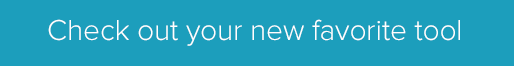
<style>
.page{position:relative;width:514px;height:66px;background:#1c9ebc}
.page>*{position:absolute;margin:0}
.t1{font:30px "ProximaNova-Light";letter-spacing:-0.006em;color:#ffffff}
</style>
<div class="page">
<p class="t1" style="left:48px;top:19px;width:412px;height:27px">Check out your new favorite tool</p>
</div>
